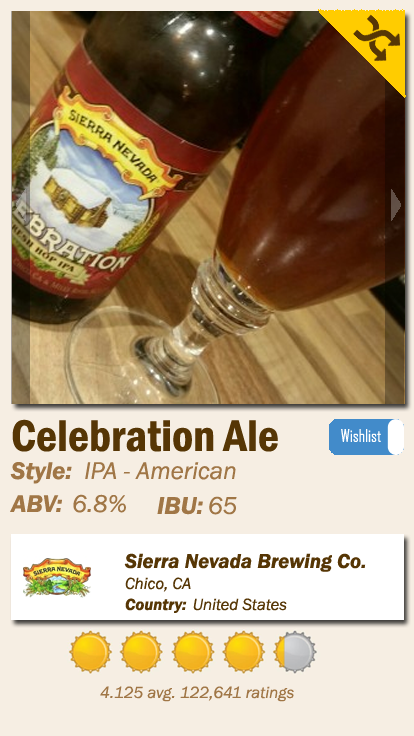
<style>
.page{position:relative;width:414px;height:736px;background:#f6eee3}
.page>*{position:absolute;margin:0}
.t1{font:45.8px "FranklinGothic-DemiCond";color:#563605}
.t2{font:16.7px "AgencyFB-Reg";color:#ffffff}
.t3{font:25px "FranklinGothic-BookItalic";color:#a07646}
.t4{font:25px "FranklinGothic-DemiItalic";color:#a07646}
.t5{font:20.8px "FranklinGothic-DemiItalic";color:#563605}
.t6{font:16.7px "FranklinGothic-BookItalic";color:#563605}
.t7{font:16.7px "FranklinGothic-DemiItalic";color:#563605}
.t8{font:16.7px "FranklinGothic-BookItalic";color:#a07646}
</style>
<div class="page">
<p class="t1" style="left:12px;top:419px;width:266px;height:33px">Celebration Ale</p>
<p class="t2" style="left:341px;top:429px;width:40px;height:13px">Wishlist</p>
<p class="t3" style="left:10px;top:462px;width:226px;height:22px"><span class="t4">Style:</span>  IPA - American</p>
<p class="t4" style="left:10px;top:494px;width:116px;height:19px">ABV:  <span class="t3">6.8%</span></p>
<p class="t4" style="left:157px;top:496px;width:80px;height:19px">IBU: <span class="t3">65</span></p>
<p class="t5" style="left:124px;top:553px;width:242px;height:19px">Sierra Nevada Brewing Co.</p>
<p class="t6" style="left:125px;top:577px;width:66px;height:15px">Chico, CA</p>
<p class="t6" style="left:125px;top:598px;width:162px;height:15px"><span class="t7">Country:  </span>United States</p>
<p class="t8" style="left:100px;top:686px;width:194px;height:16px">4.125 avg. 122,641 ratings</p>
</div>
